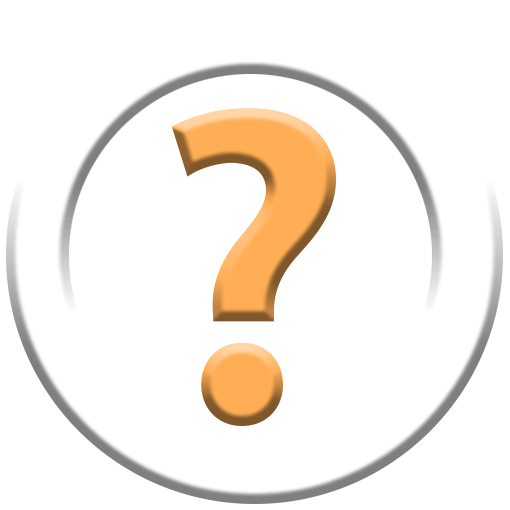
<style>
.page{position:relative;width:510px;height:510px;background:#ffffff}
.page>*{position:absolute;margin:0}
.t1{font:457px "MyriadPro-Bold";color:#ffae55;font-variant:small-caps}
</style>
<div class="page">
<p class="t1" style="left:171px;top:108px;width:165px;height:318px">?</p>
</div>
